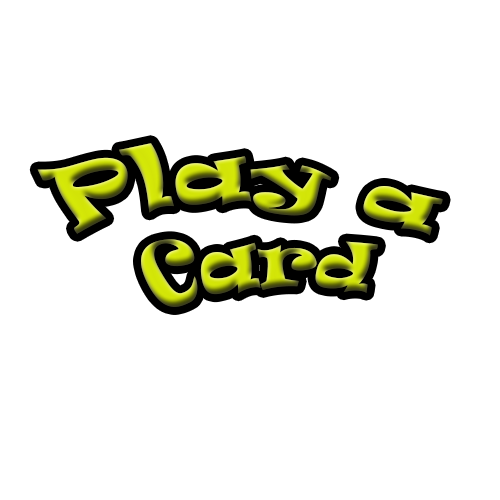
<style>
.page{position:relative;width:500px;height:500px;background:#ffffff}
.page>*{position:absolute;margin:0}
.t1{font:65.3px "Ravie"}
</style>
<div class="page">
<p class="t1" style="left:37px;top:143px;width:406px;height:164px;text-align:center">Play a Card</p>
</div>
